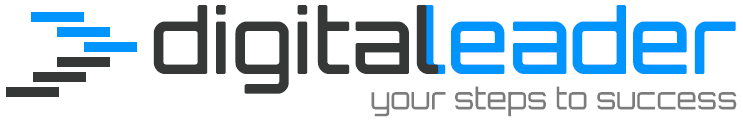
<style>
.page{position:relative;width:743px;height:120px;background:#ffffff}
.page>*{position:absolute;margin:0}
.t1{font:86.3px "Orbitron-Regular";color:#363737;font-weight:bold}
.t2{font:86.3px "Orbitron-Regular";color:#0094ff;font-weight:bold}
.t3{font:29.7px "Orbitron-Regular";color:#7c7c7c}
</style>
<div class="page">
<p class="t1" style="left:153px;top:5px;width:286px;height:89px">digital</p>
<p class="t2" style="left:424px;top:5px;width:312px;height:69px">leader</p>
<p class="t3" style="left:371px;top:86px;width:366px;height:31px">your steps to success</p>
</div>
